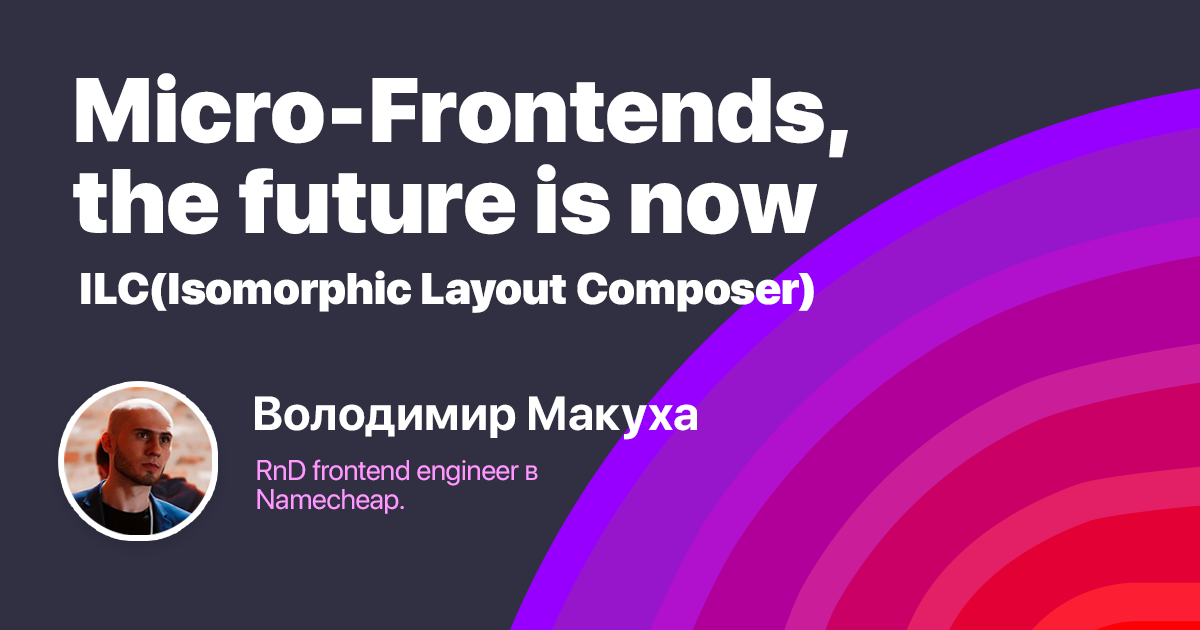
<style>
.page{position:relative;width:1200px;height:630px;background:#313043}
.page>*{position:absolute;margin:0}
.t1{font:90.6px/90.6px "SFProDisplay-Black";color:#ffffff}
.t2{font:44px "SFProDisplay-Black";color:#ffffff}
.t3{font:47.5px "SFProDisplay-Bold";color:#ffffff}
.t4{font:28.5px/28.5px "SFProDisplay-Regular";color:#ff99ff}
</style>
<div class="page">
<p class="t1" style="left:73px;top:73px;width:775px;height:162px">Micro-Frontends, <br>the future is now</p>
<p class="t2" style="left:81px;top:270px;width:733px;height:43px">ILC(Isomorphic Layout Composer)</p>
<p class="t3" style="left:255px;top:396px;width:442px;height:44px">Володимир Макуха</p>
<p class="t4" style="left:257px;top:459px;width:281px;height:55px">RnD frontend engineer в <br>Namecheap.</p>
</div>
